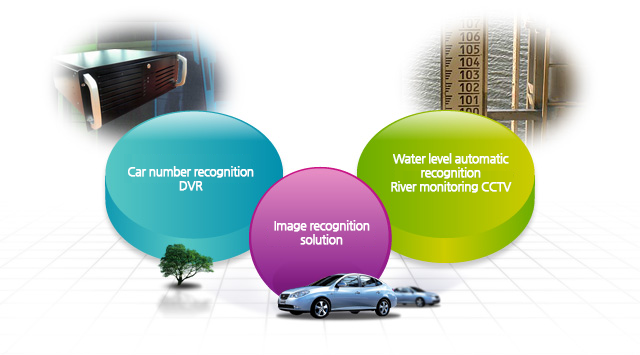
<style>
.page{position:relative;width:640px;height:355px;background:#ffffff}
.page>*{position:absolute;margin:0}
.t1{font:12px/14px "NanumGothic";letter-spacing:-0.05em;color:#ffffff;font-weight:bold}
</style>
<div class="page">
<p class="t1" style="left:391px;top:153px;width:121px;height:40px;text-align:center">Water level automatic<br>recognition<br>River monitoring CCTV</p>
<p class="t1" style="left:128px;top:166px;width:126px;height:25px;text-align:center">Car number recognition<br>DVR</p>
<p class="t1" style="left:274px;top:220px;width:96px;height:25px;text-align:center">Image recognition<br>solution</p>
</div>
